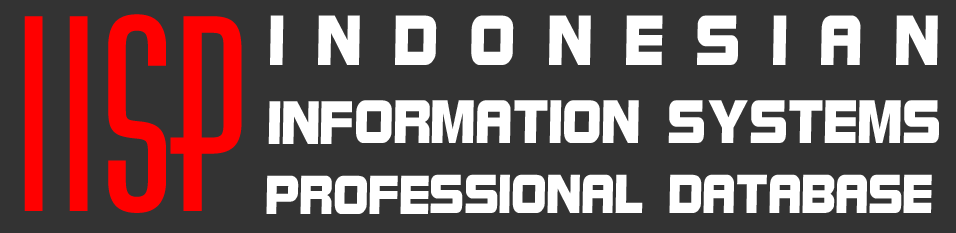
<style>
.page{position:relative;width:956px;height:233px;background:#333333}
.page>*{position:absolute;margin:0}
.t1{font:260px "HuxleyTitling";color:#ff0000}
.t2{font:58.5px "BolsterBold";color:#ffffff;scale:0.83 1}
.t3{font:75.7px "BolsterBold";color:#ffffff;scale:0.83 1}
.t4{font:65.1px "BolsterBold";color:#ffffff;scale:0.83 1}
</style>
<div class="page">
<p class="t1" style="left:24px;top:14px;width:218px;height:199px">IISP</p>
<p class="t2" style="left:266px;top:15px;width:673px;height:199px"><span class="t3">I N D O N E S I A N <br></span><span class="t4">INFORMATION SYSTEMS  <br></span>PROFESSIONAL DATABASE</p>
</div>
